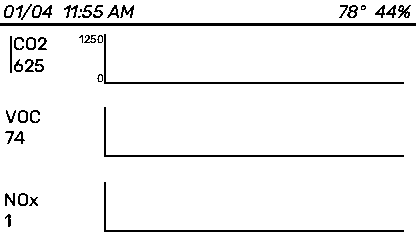
<style>
.page{position:relative;width:416px;height:240px;background:#ffffff}
.page>*{position:absolute;margin:0}
.t1{font:18px "RubikLight-Italic";color:#000000}
.t2{font:18px "RubikLight-Regular";color:#000000}
.t3{font:11px "RubikLight-Regular";color:#000000}
</style>
<div class="page">
<p class="t1" style="left:3px;top:3px;width:132px;height:17px">01/04  11:55 AM</p>
<p class="t1" style="left:339px;top:5px;width:72px;height:14px">78°  44%</p>
<p class="t2" style="left:13px;top:37px;width:34px;height:36px">CO2 <br>625</p>
<p class="t3" style="left:79px;top:35px;width:25px;height:9px">1250</p>
<p class="t3" style="left:97px;top:74px;width:7px;height:9px">0</p>
<p class="t2" style="left:5px;top:110px;width:36px;height:34px">VOC<br>74</p>
<p class="t2" style="left:4px;top:193px;width:35px;height:34px">NOx<br>1</p>
</div>
